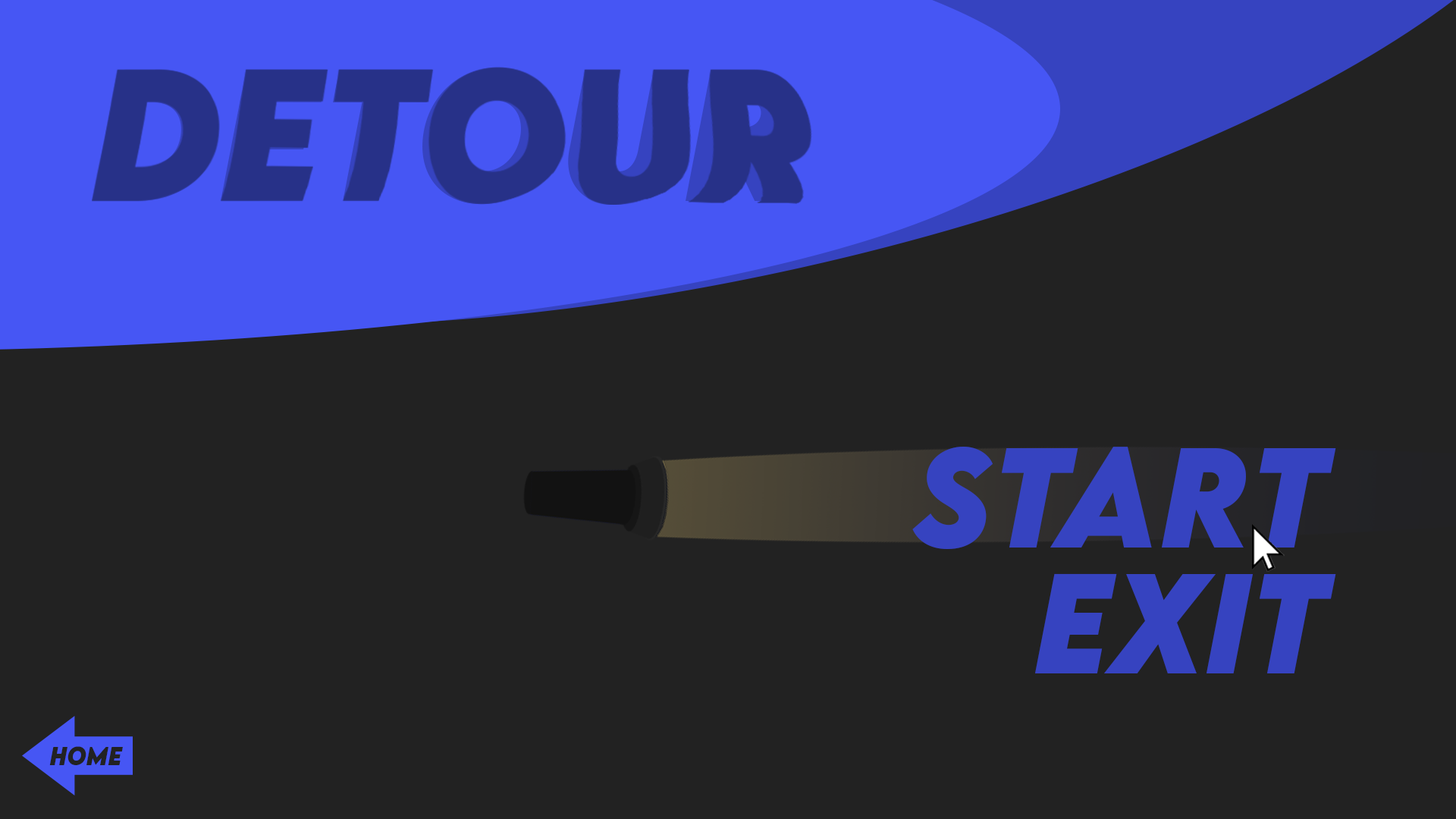
<style>
.page{position:relative;width:1456px;height:819px;background:#222222}
.page>*{position:absolute;margin:0}
.t1{font:167px "LEMONMILK-BoldItalic";color:#273188}
.t2{font:126.4px "LEMONMILK-BoldItalic";color:#3643c0}
</style>
<div class="page">
<p class="t1" style="left:92px;top:67px;width:704px;height:138px">detour</p>
<p class="t2" style="left:912px;top:447px;width:424px;height:102px">start</p>
<p class="t2" style="left:1035px;top:573px;width:301px;height:100px">exit</p>
</div>
